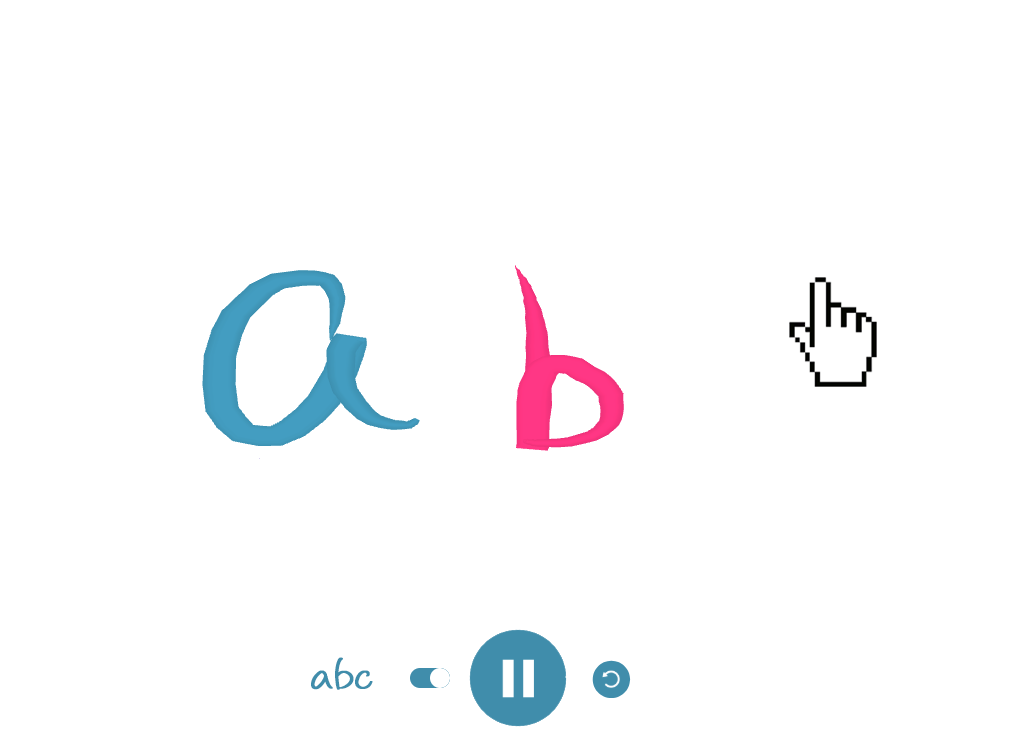
<style>
.page{position:relative;width:1024px;height:738px;background:#ffffff}
.page>*{position:absolute;margin:0}
.t1{font:45.9px "MLingWaiMedium-SC";color:#408dab;font-weight:bold;scale:1.24 1}
</style>
<div class="page">
<p class="t1" style="left:311px;top:657px;width:62px;height:33px">abc</p>
</div>
